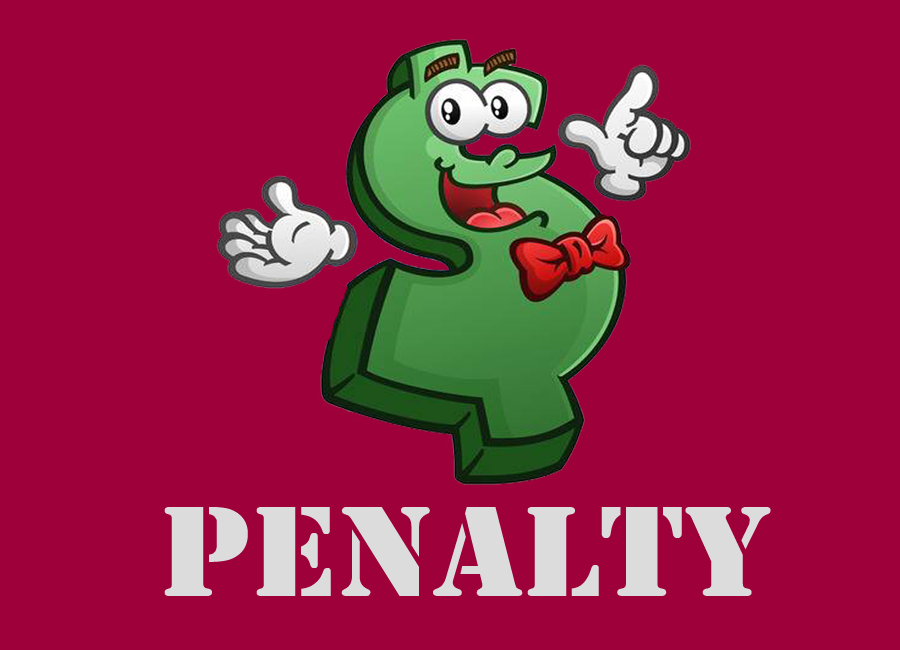
<style>
.page{position:relative;width:900px;height:650px;background:#9e0039}
.page>*{position:absolute;margin:0}
.t1{font:133.7px "Stencil";color:#dcdcdc;scale:1.08 1}
</style>
<div class="page">
<p class="t1" style="left:164px;top:507px;width:607px;height:89px">Penalty</p>
</div>
